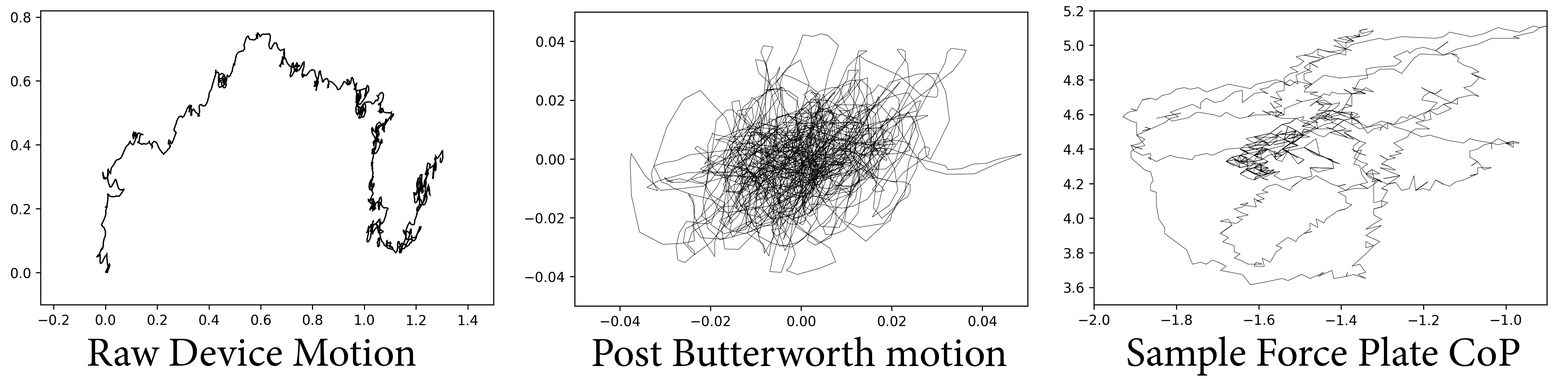
<style>
.page{position:relative;width:1568px;height:379px;background:#ffffff}
.page>*{position:absolute;margin:0}
.t1{font:41.6px "MinionPro-Regular";color:#000000}
</style>
<div class="page">
<p class="t1" style="left:88px;top:339px;width:328px;height:27px">Raw Device Motion</p>
<p class="t1" style="left:593px;top:337px;width:414px;height:30px">Post Butterworth motion</p>
<p class="t1" style="left:1127px;top:336px;width:393px;height:40px">Sample Force Plate CoP</p>
</div>
